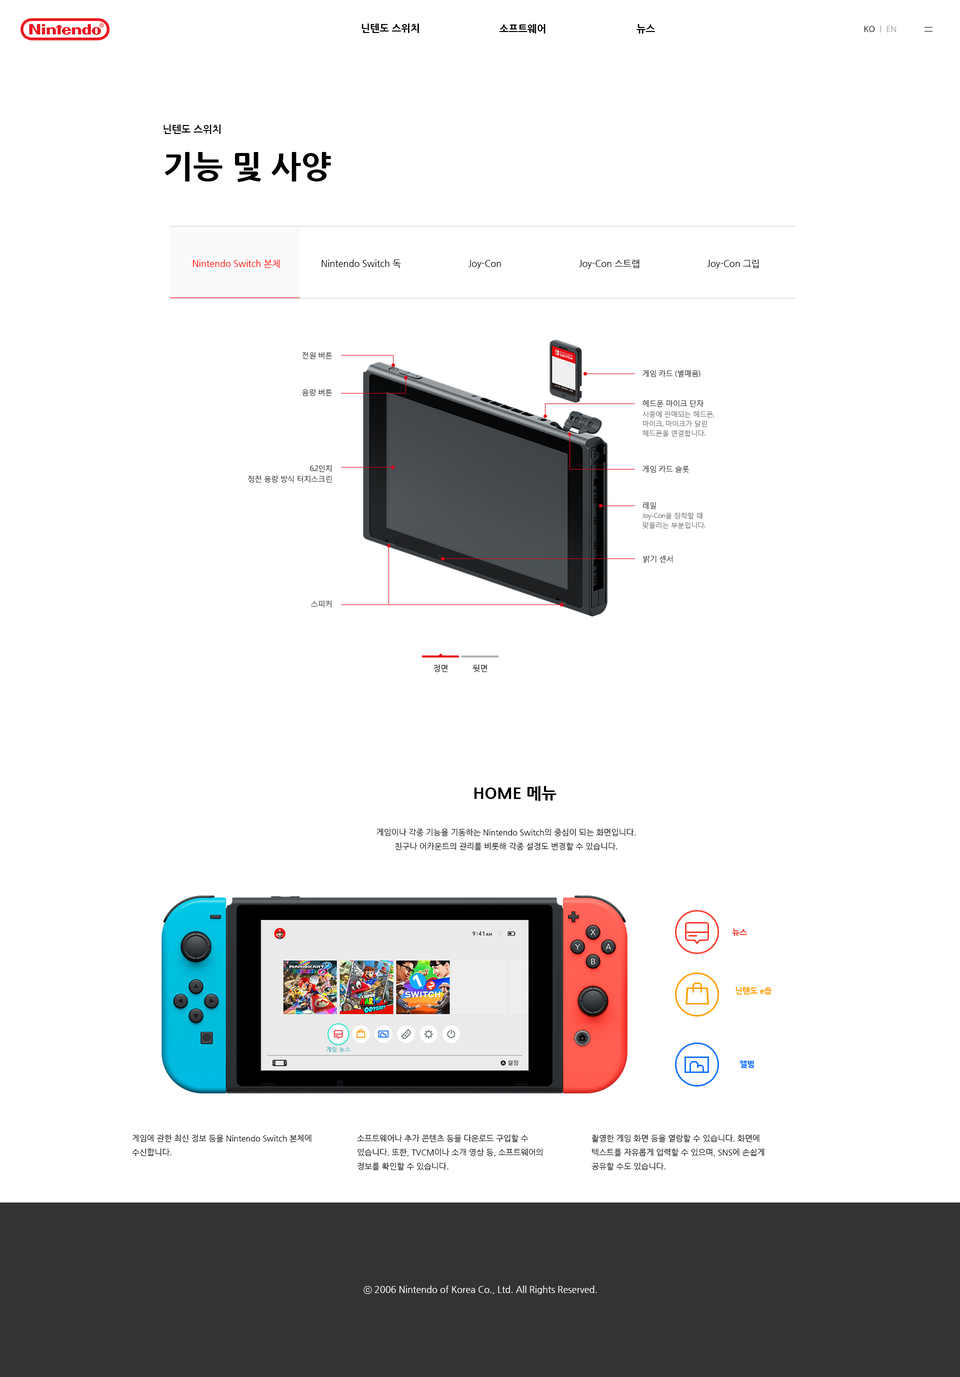
<style>
.page{position:relative;width:960px;height:1377px;background:#ffffff}
.page>*{position:absolute;margin:0}
.t1{font:10px "NanumGothicExtraBold";color:#000000}
.t2{font:8px "NanumGothic";color:#000000}
.t3{font:8px "NanumGothic";color:#a3a3a3}
.t4{font:10px "NanumGothicBold";color:#010000}
.t5{font:32px "NanumGothicExtraBold";color:#000000}
.t6{font:9px "NanumGothic";color:#ff0000}
.t7{font:9px "NanumGothic";color:#000000}
.t8{font:16px "NanumGothicExtraBold";color:#000000}
.t9{font:8px "NanumGothicExtraBold";color:#fe3c32}
.t10{font:8px "NanumGothicExtraBold";color:#ff9f00}
.t11{font:8px "NanumGothicExtraBold";color:#1271ff}
.t12{font:9px "NanumGothic";color:#ffffff}
</style>
<div class="page">
<p class="t1" style="left:362px;top:24px;width:57px;height:9px">닌텐도 스위치</p>
<p class="t1" style="left:499px;top:24px;width:47px;height:10px">소프트웨어</p>
<p class="t1" style="left:636px;top:24px;width:19px;height:10px">뉴스</p>
<p class="t2" style="left:864px;top:26px;width:11px;height:6px">KO</p>
<p class="t3" style="left:880px;top:26px;width:16px;height:6px">|  EN</p>
<p class="t4" style="left:164px;top:124px;width:56px;height:10px">닌텐도 스위치</p>
<p class="t5" style="left:164px;top:152px;width:167px;height:30px">기능 및 사양</p>
<p class="t6" style="left:193px;top:260px;width:87px;height:8px">Nintendo Switch 본체</p>
<p class="t7" style="left:322px;top:260px;width:79px;height:8px">Nintendo Switch 독</p>
<p class="t7" style="left:468px;top:260px;width:33px;height:8px">Joy-Con</p>
<p class="t7" style="left:579px;top:260px;width:61px;height:8px">Joy-Con 스트랩</p>
<p class="t7" style="left:707px;top:260px;width:52px;height:8px">Joy-Con 그립</p>
<p class="t2" style="left:434px;top:664px;width:14px;height:8px">정면</p>
<p class="t2" style="left:472px;top:664px;width:15px;height:8px">뒷면</p>
<p class="t8" style="left:474px;top:786px;width:82px;height:15px">HOME 메뉴</p>
<p class="t2" style="left:376px;top:828px;width:260px;height:22px;text-align:center">게임이나 각종 기능을 기동하는 Nintendo Switch의 중심이 되는 화면입니다.<br>친구나 어카운트의 관리를 비롯해 각종 설정도 변경할 수 있습니다.</p>
<p class="t9" style="left:732px;top:928px;width:16px;height:8px">뉴스</p>
<p class="t10" style="left:736px;top:987px;width:36px;height:7px">닌텐도 e숍</p>
<p class="t11" style="left:740px;top:1060px;width:14px;height:8px">앨범</p>
<p class="t2" style="left:132px;top:1134px;width:180px;height:22px">게임에 관한 최신 정보 등을 Nintendo Switch 본체에<br>수신합니다.</p>
<p class="t2" style="left:357px;top:1134px;width:185px;height:36px">소프트웨어나 추가 콘텐츠 등을 다운로드 구입할 수<br>있습니다. 또한, TVCM이나 소개 영상 등, 소프트웨어의<br>정보를 확인할 수 있습니다.</p>
<p class="t2" style="left:592px;top:1134px;width:172px;height:36px">촬영한 게임 화면 등을 열람할 수 있습니다. 화면에<br>텍스트를 자유롭게 입력할 수 있으며, SNS에 손쉽게<br>공유할 수도 있습니다.</p>
<p class="t12" style="left:364px;top:1286px;width:233px;height:8px">ⓒ 2006 Nintendo of Korea Co., Ltd. All Rights Reserved.</p>
</div>
